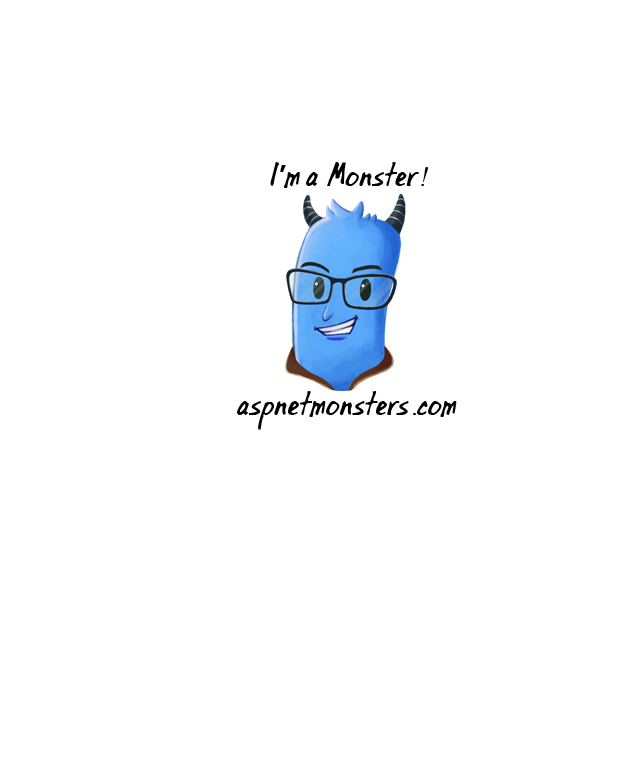
<style>
.page{position:relative;width:630px;height:768px;background:#ffffff}
.page>*{position:absolute;margin:0}
.t1{font:30px "OilBatsBasic";color:#000000}
.t2{font:30px "NirmalaUI-Bold";letter-spacing:-0.1em;color:#000000}
.t3{font:30px "OilBatsBasic";letter-spacing:-0.1em;color:#000000}
.t4{font:30px "BellMTItalic";color:#000000}
</style>
<div class="page">
<p class="t1" style="left:270px;top:162px;width:158px;height:26px">I<span class="t2">’</span><span class="t3">m</span> a Monster<span class="t4">!</span></p>
<p class="t1" style="left:237px;top:391px;width:220px;height:39px">aspnetmonsters<span class="t4">.</span>com</p>
</div>
